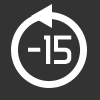
<style>
.page{position:relative;width:100px;height:100px;background:#333333}
.page>*{position:absolute;margin:0}
.t1{font:41.7px "AeroMaticsDisplayRegular";color:#ffffff}
</style>
<div class="page">
<p class="t1" style="left:28px;top:35px;width:44px;height:29px">-15</p>
</div>
